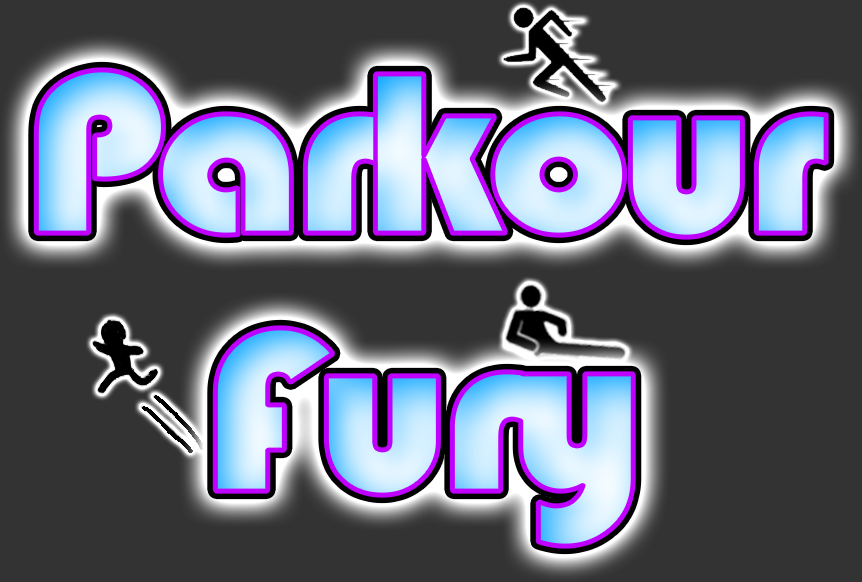
<style>
.page{position:relative;width:862px;height:582px;background:#333333}
.page>*{position:absolute;margin:0}
.t1{font:56.6px "Bauhaus93";letter-spacing:-0.07em;font-weight:bold;scale:1.07 1}
</style>
<div class="page">
<p class="t1" style="left:36px;top:69px;width:791px;height:478px;text-align:center">Parkour<br>Fury</p>
</div>
